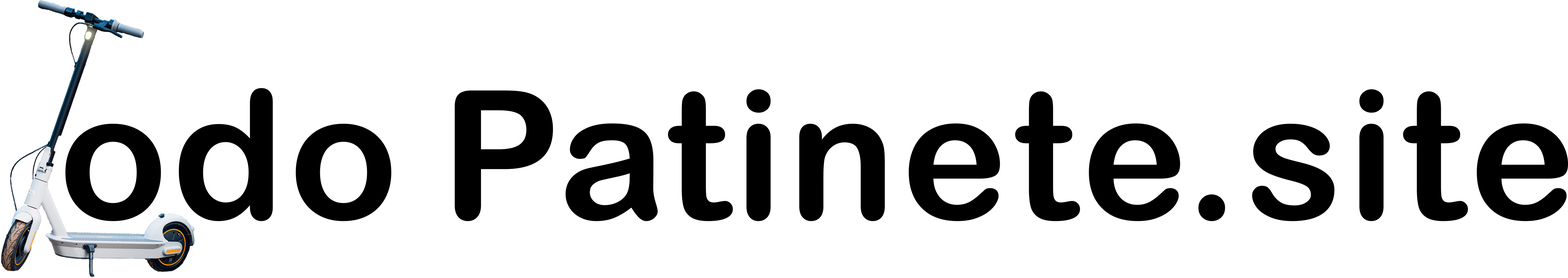
<style>
.page{position:relative;width:1568px;height:278px;background:#ffffff}
.page>*{position:absolute;margin:0}
.t1{font:179.6px "ArialRoundedMTBold";color:#000000;font-weight:bold}
</style>
<div class="page">
<p class="t1" style="left:65px;top:88px;width:326px;height:133px">odo</p>
<p class="t1" style="left:454px;top:89px;width:1114px;height:132px">Patinete.site</p>
</div>
